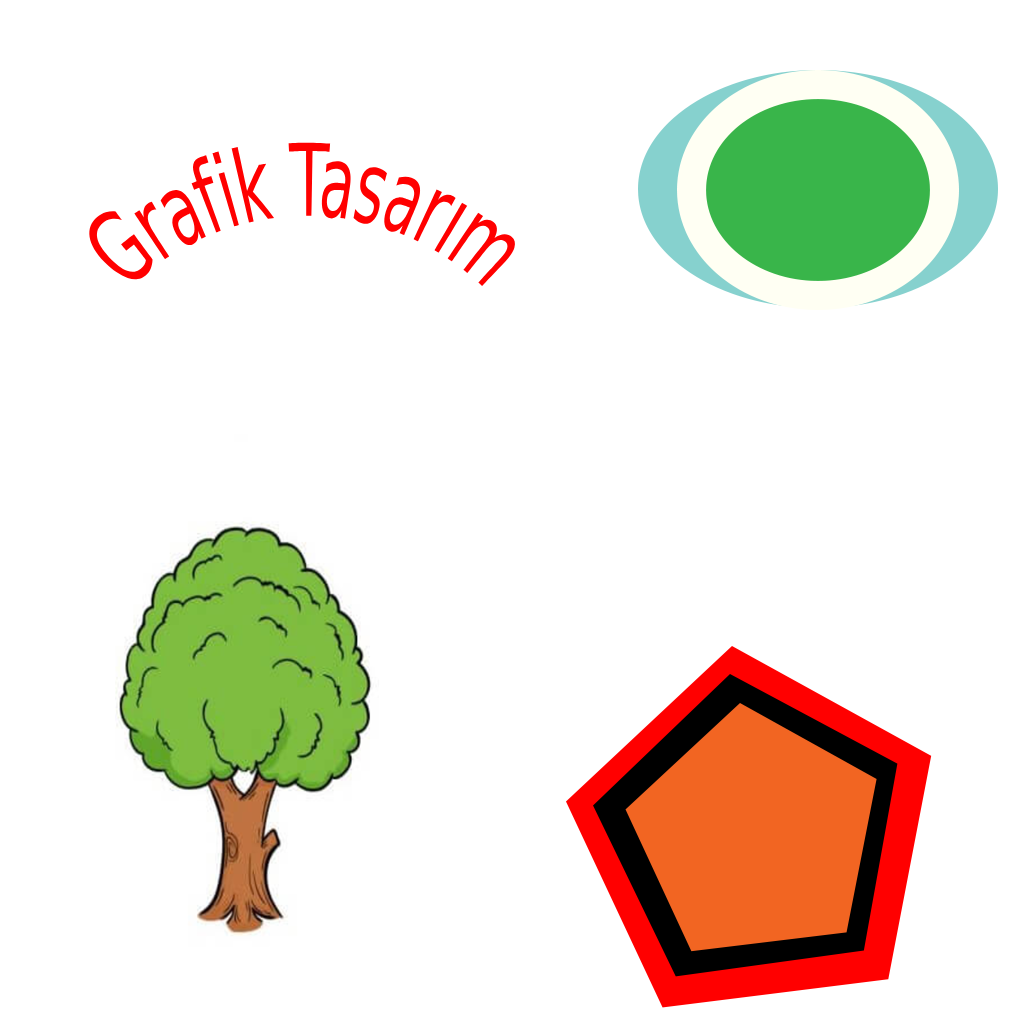
<style>
.page{position:relative;width:1024px;height:1024px;background:#ffffff}
.page>*{position:absolute;margin:0}
.t1{font:100.3px "Gunplay-Regular";letter-spacing:0.02em;color:#ff0000;scale:0.48 1}
</style>
<div class="page">
<p class="t1" style="left:89px;top:142px;width:427px;height:144px">Grafik Tasarım</p>
</div>
